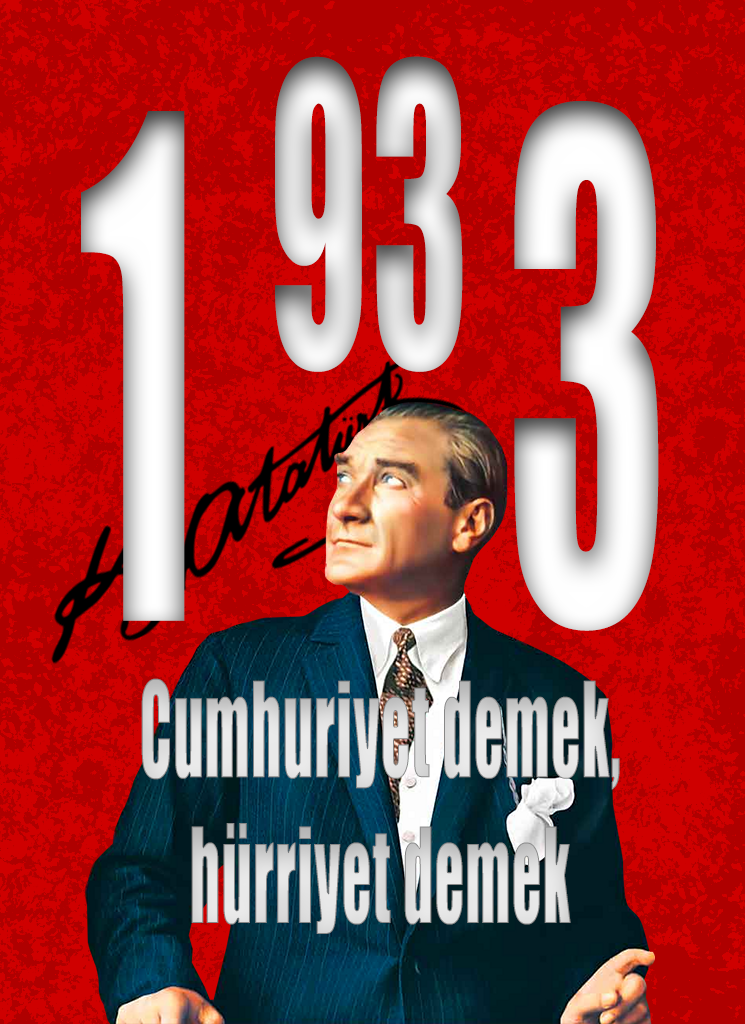
<style>
.page{position:relative;width:745px;height:1024px;background:#af0000}
.page>*{position:absolute;margin:0}
.t1{font:383.2px "Impact";letter-spacing:0.02em;color:#ffffff;scale:0.48 1}
.t2{font:644.4px "Impact";letter-spacing:0.02em;color:#ffffff;scale:0.48 1}
.t3{font:121.9px/145.8px "Impact";letter-spacing:0.02em;color:#ffffff;scale:0.48 1}
</style>
<div class="page">
<p class="t1" style="left:275px;top:56px;width:188px;height:316px">93</p>
<p class="t2" style="left:81px;top:101px;width:578px;height:530px">1     3</p>
<p class="t3" style="left:141px;top:678px;width:479px;height:256px;text-align:center">Cumhuriyet demek,<br>hürriyet demek</p>
</div>
